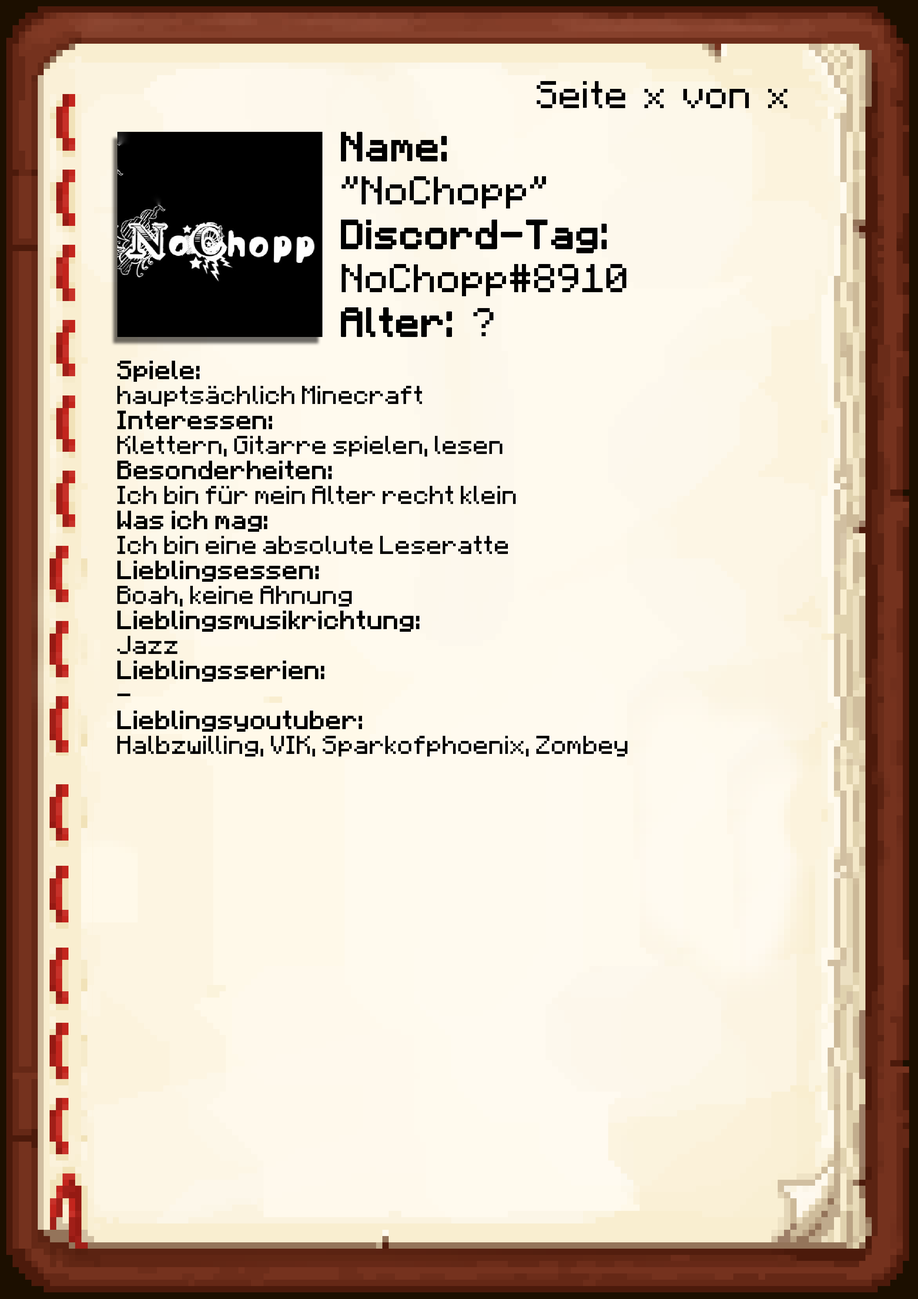
<style>
.page{position:relative;width:918px;height:1299px}
.page>*{position:absolute;margin:0}
.t1{font:38.6px "Minecraft-Regular";color:#000000}
.t2{font:40.1px/43.9px "Minecraft-Regular";color:#000000;font-weight:bold}
.t3{font:40.1px/43.9px "Minecraft-Regular";color:#000000}
.t4{font:20.8px "Minecraft";color:#000000}
.t5{font:20.8px "Minecraft";color:#000000;font-weight:bold}
</style>
<div class="page">
<p class="t1" style="left:537px;top:81px;width:250px;height:27px">Seite x von x</p>
<p class="t2" style="left:341px;top:132px;width:285px;height:205px">Name:<br><span class="t3">"NoChopp"<br></span>Discord-Tag:<br><span class="t3">NoChopp#8910<br></span>Alter: <span class="t3">?</span></p>
<p class="t4" style="left:117px;top:361px;width:511px;height:395px"><span class="t5">Spiele: <br></span>hauptsächlich Minecraft<br><span class="t5">Interessen:<br></span>Klettern, Gitarre spielen, lesen<br><span class="t5">Besonderheiten: <br></span>Ich bin für mein Alter recht klein<br><span class="t5">Was ich mag:<br></span>Ich bin eine absolute Leseratte<br><span class="t5">Lieblingsessen:<br></span>Boah, keine Ahnung<br><span class="t5">Lieblingsmusikrichtung:<br></span>Jazz<br><span class="t5">Lieblingsserien:<br></span>-<br><span class="t5">Lieblingsyoutuber:<br></span>Halbzwilling, VIK, Sparkofphoenix, Zombey</p>
</div>
